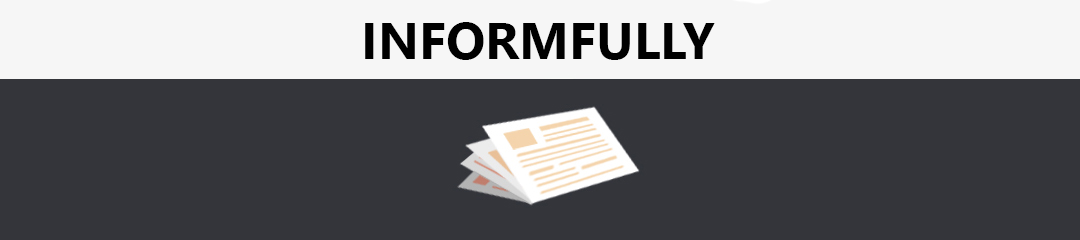
<style>
.page{position:relative;width:1080px;height:240px;background:#34353a}
.page>*{position:absolute;margin:0}
.t1{font:52px "SegoeUI-Bold";color:#000000}
</style>
<div class="page">
<p class="t1" style="left:365px;top:22px;width:350px;height:38px">INFORMFULLY</p>
</div>
